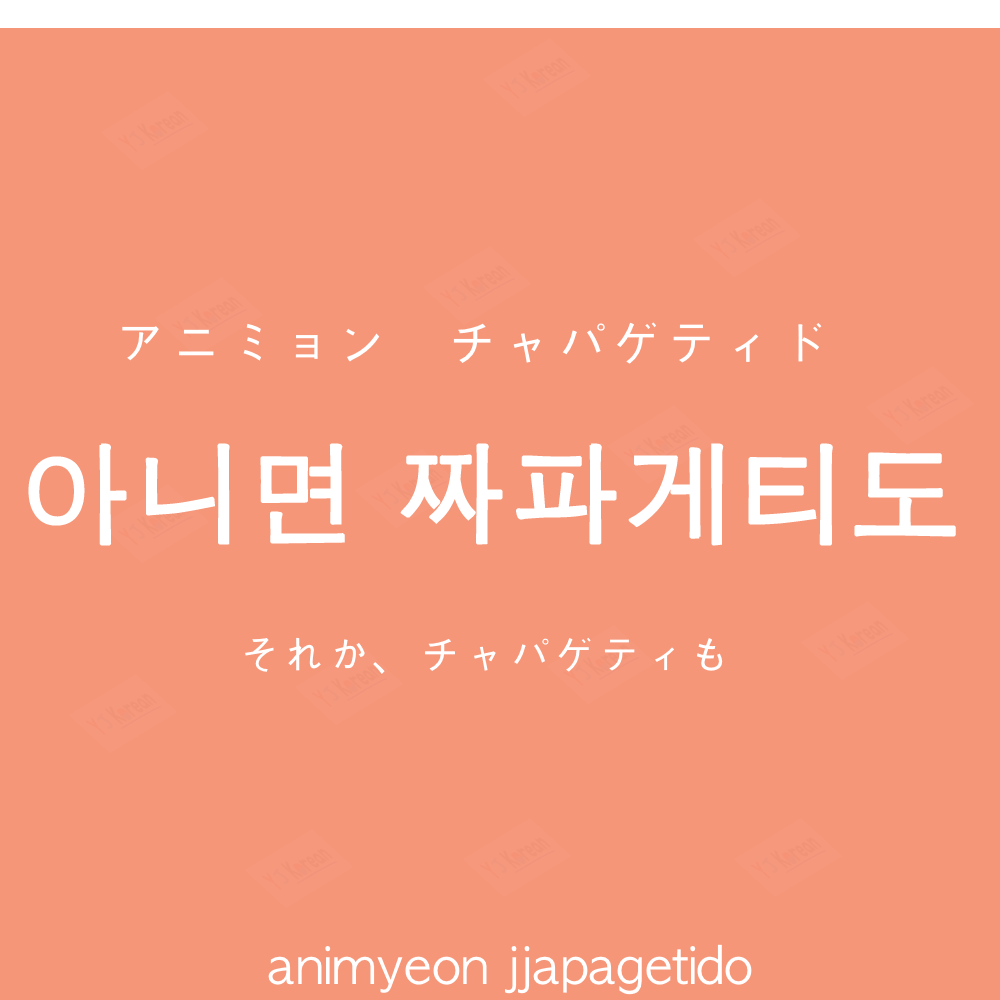
<style>
.page{position:relative;width:1000px;height:1000px;background:#f69679}
.page>*{position:absolute;margin:0}
.t1{font:55px "AppleGothic";color:#ffffff}
.t2{font:110px "AppleGothic";color:#ffffff;font-weight:bold}
.t3{font:45px "AppleGothic";color:#ffffff}
.t4{font:50px "AppleGothic";color:#ffffff}
</style>
<div class="page">
<p class="t1" style="left:122px;top:322px;width:700px;height:42px">アニミョン　チャパゲティド</p>
<p class="t2" style="left:28px;top:443px;width:928px;height:103px">아니면 짜파게티도</p>
<p class="t3" style="left:245px;top:637px;width:478px;height:37px">それか、チャパゲティも</p>
<p class="t4" style="left:268px;top:944px;width:484px;height:51px">animyeon jjapagetido</p>
</div>
